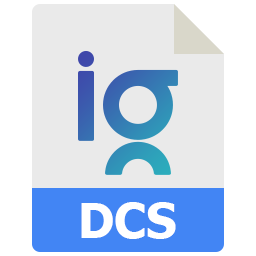
<style>
.page{position:relative;width:256px;height:256px;background:#eaeaea}
.page>*{position:absolute;margin:0}
.t1{font:48px "Tahoma-Bold";color:#ffffff}
</style>
<div class="page">
<p class="t1" style="left:81px;top:202px;width:95px;height:37px">DCS</p>
</div>
